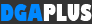
<style>
.page{position:relative;width:92px;height:24px;background:#333333}
.page>*{position:absolute;margin:0}
.t1{font:23px "GillSans-UltraBoldCondensed";color:#ffffff}
.t2{font:23px "GillSans-UltraBoldCondensed";color:#0088ff}
</style>
<div class="page">
<p class="t1" style="left:1px;top:4px;width:91px;height:17px"><span class="t2">DGA</span>PLUS</p>
</div>
